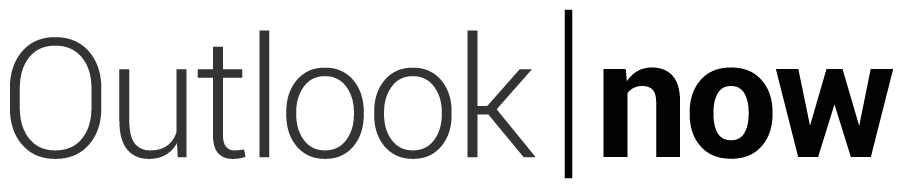
<style>
.page{position:relative;width:909px;height:188px;background:#ffffff}
.page>*{position:absolute;margin:0}
.t1{font:199.7px "Roboto-Light";letter-spacing:-0.025em;color:#030303;scale:0.74 1}
.t2{font:166px "Roboto-Light";letter-spacing:-0.025em;color:#333333}
.t3{font:166px "Roboto-Bold";letter-spacing:-0.025em;color:#030303}
</style>
<div class="page">
<p class="t1" style="left:564px;top:9px;width:9px;height:170px">|</p>
<p class="t2" style="left:10px;top:30px;width:525px;height:129px">Outlook</p>
<p class="t3" style="left:603px;top:67px;width:290px;height:92px">now</p>
</div>
